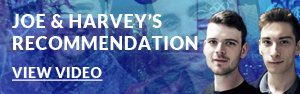
<style>
.page{position:relative;width:300px;height:94px}
.page>*{position:absolute;margin:0}
.t1{font:18px "Lato-Black";letter-spacing:0.04em;color:#ffffff;text-transform:uppercase}
.t2{font:14px "Lato-Black";letter-spacing:0.04em;color:#ffffff;text-transform:uppercase;text-decoration:underline}
</style>
<div class="page">
<p class="t1" style="left:12px;top:14px;width:186px;height:36px">JOe &amp; Harvey’s<br>RECOMMENDATION</p>
<p class="t2" style="left:12px;top:67px;width:91px;height:14px">VIEW VIDEO</p>
</div>
